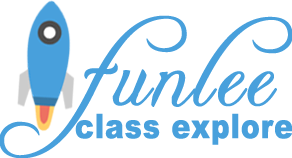
<style>
.page{position:relative;width:292px;height:158px;background:#ffffff}
.page>*{position:absolute;margin:0}
.t1{font:100px "FreebooterScript";letter-spacing:0.01em;color:#48a0dc;font-weight:bold}
.t2{font:33.6px "Arial-Black";letter-spacing:0.01em;color:#48a0dc;font-weight:bold;scale:0.83 1}
</style>
<div class="page">
<p class="t1" style="left:0px;top:15px;width:293px;height:144px">funlee</p>
<p class="t2" style="left:75px;top:113px;width:218px;height:32px">class explore</p>
</div>
